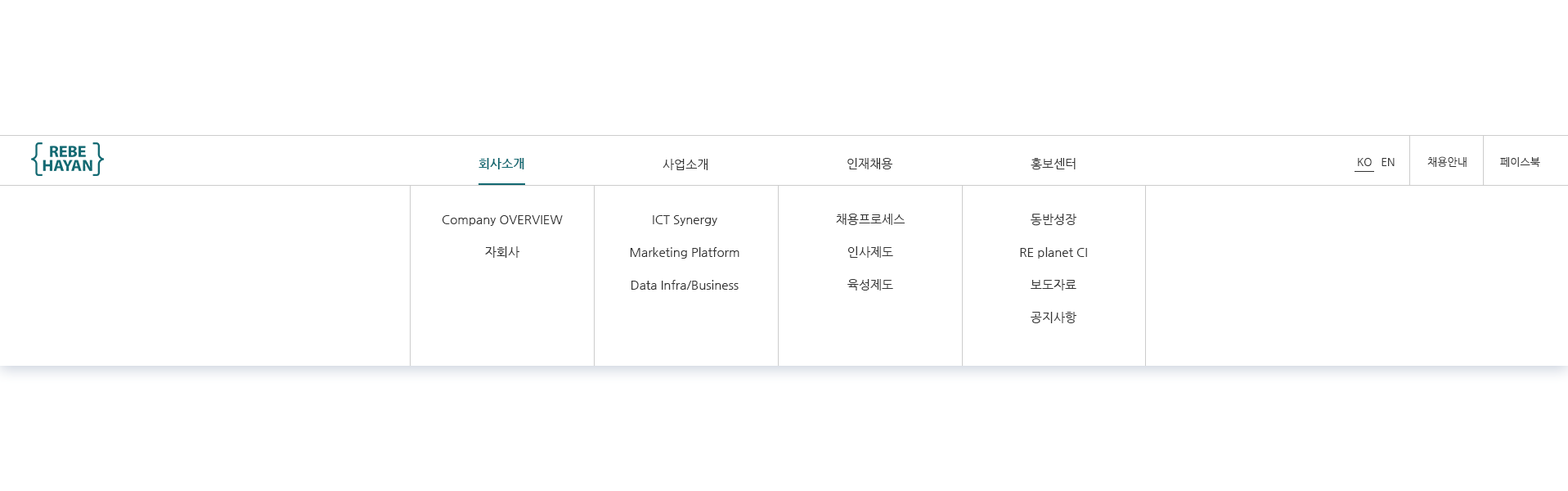
<style>
.page{position:relative;width:1568px;height:491px;background:#ffffff}
.page>*{position:absolute;margin:0}
.t1{font:12.3px "NanumGothicBold";color:#136972}
.t2{font:12.3px "NanumGothic";color:#333333}
.t3{font:10.6px "NanumGothic";color:#333333}
.t4{font:12.3px/32.7px "NanumGothic";color:#333333}
</style>
<div class="page">
<p class="t1" style="left:478px;top:158px;width:46px;height:11px">회사소개</p>
<p class="t2" style="left:663px;top:159px;width:45px;height:11px">사업소개</p>
<p class="t2" style="left:847px;top:158px;width:45px;height:11px">인재채용</p>
<p class="t2" style="left:1031px;top:158px;width:45px;height:12px">홍보센터</p>
<p class="t3" style="left:1358px;top:158px;width:37px;height:8px">KO   EN</p>
<p class="t3" style="left:1427px;top:156px;width:40px;height:11px">채용안내</p>
<p class="t3" style="left:1500px;top:157px;width:40px;height:10px">페이스북</p>
<p class="t4" style="left:442px;top:215px;width:121px;height:43px;text-align:center">Company OVERVIEW<br>자회사</p>
<p class="t4" style="left:630px;top:215px;width:109px;height:75px;text-align:center">ICT Synergy<br>Marketing Platform<br>Data Infra/Business</p>
<p class="t4" style="left:836px;top:213px;width:69px;height:77px;text-align:center">채용프로세스<br>인사제도<br>육성제도</p>
<p class="t4" style="left:1020px;top:213px;width:67px;height:110px;text-align:center">동반성장<br>RE planet CI<br>보도자료<br>공지사항</p>
</div>
